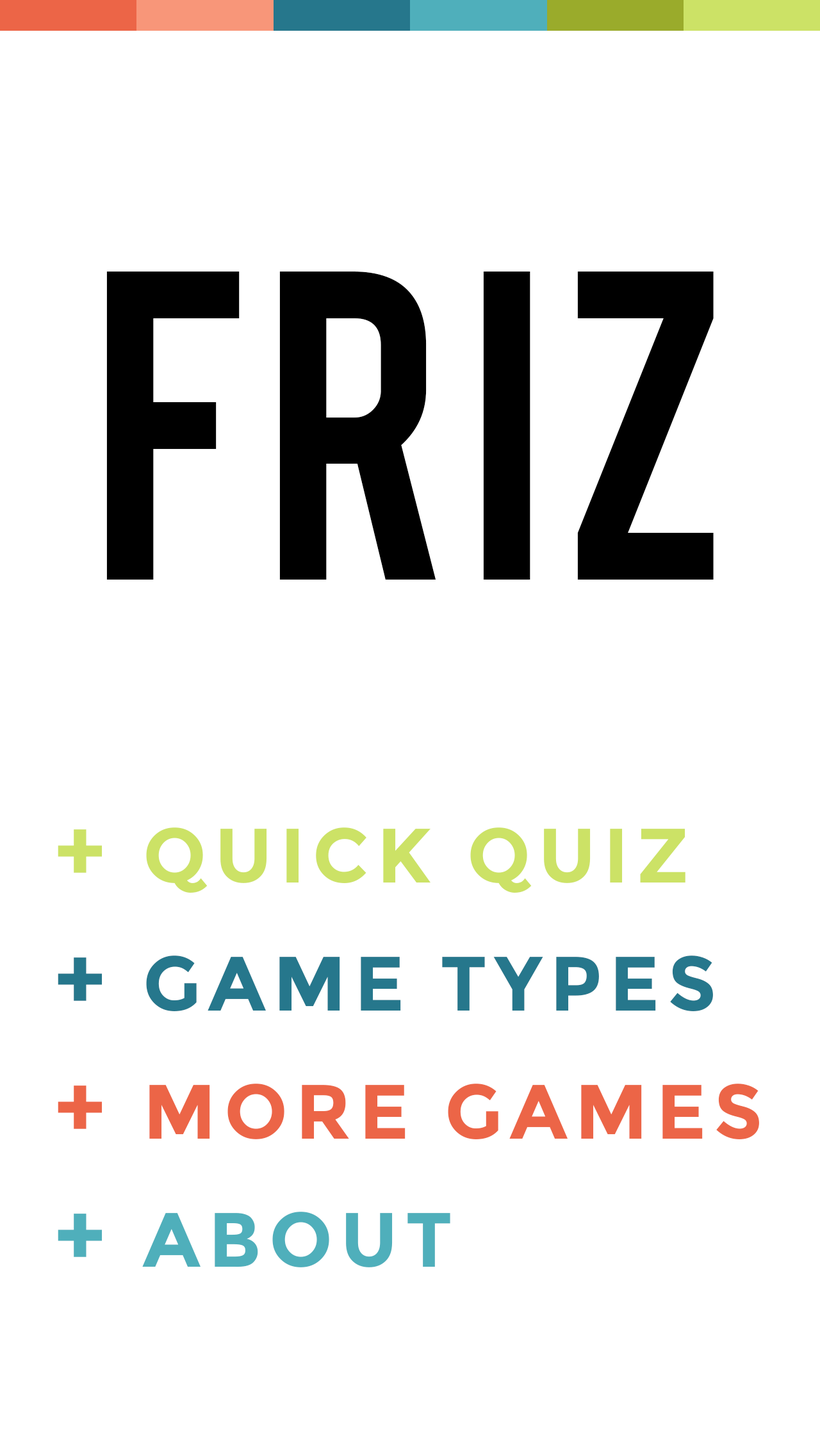
<style>
.page{position:relative;width:820px;height:1455px;background:#ffffff}
.page>*{position:absolute;margin:0}
.t1{font:345.8px "Bebas";letter-spacing:0.025em;color:#000000}
.t2{font:76.8px/64px "Montserrat-Bold";letter-spacing:0.1em;color:#cce266}
.t3{font:89.6px/64px "Montserrat-Bold";letter-spacing:0.1em;color:#cce266}
.t4{font:89.6px/64px "Montserrat-Bold";letter-spacing:0.1em;color:#26778c}
.t5{font:76.8px/64px "Montserrat-Bold";letter-spacing:0.1em;color:#26778c}
.t6{font:89.6px/64px "Montserrat-Bold";letter-spacing:0.1em;color:#ec6547}
.t7{font:76.8px/64px "Montserrat-Bold";letter-spacing:0.1em;color:#ec6547}
.t8{font:89.6px/64px "Montserrat-Bold";letter-spacing:0.1em;color:#4fafbb}
.t9{font:76.8px/64px "Montserrat-Bold";letter-spacing:0.1em;color:#4fafbb}
</style>
<div class="page">
<p class="t1" style="left:106px;top:272px;width:607px;height:308px">FRIZ</p>
<p class="t2" style="left:58px;top:827px;width:701px;height:440px"><span class="t3">+ </span>QUICK QUIZ<br><br><span class="t4">+ </span><span class="t5">GAME TYPES<br><br></span><span class="t6">+ </span><span class="t7">MORE GAMES<br><br></span><span class="t8">+ </span><span class="t9">ABOUT</span></p>
</div>
